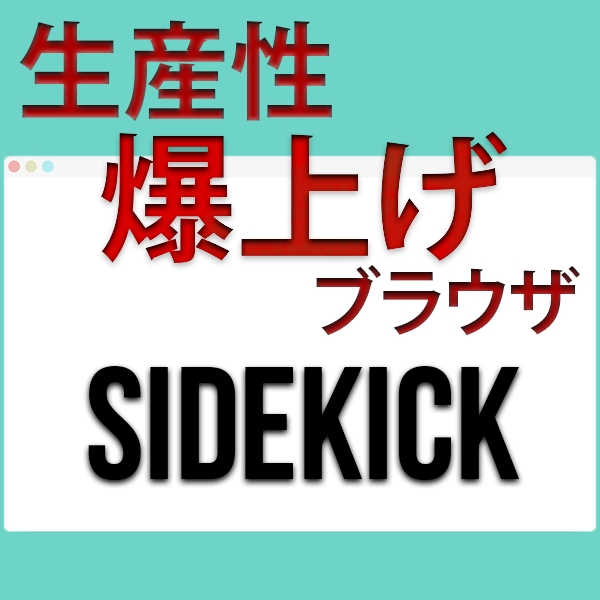
<style>
.page{position:relative;width:600px;height:600px;background:#ffffff}
.page>*{position:absolute;margin:0}
.t1{font:105.8px "KozGoPr6N-Bold"}
.t2{font:74.1px "KozGoPr6N-Bold"}
.t3{font:158.8px "BebasNeue-Bold";color:#000000}
</style>
<div class="page">
<p class="t1" style="left:19px;top:20px;width:313px;height:102px">生産性</p>
<p class="t2" style="left:316px;top:265px;width:264px;height:71px">ブラウザ</p>
<p class="t3" style="left:88px;top:366px;width:432px;height:114px">Sidekick</p>
</div>
